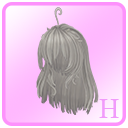
<style>
.page{position:relative;width:128px;height:128px}
.page>*{position:absolute;margin:0}
.t1{font:28.4px "TimesNewRomanPSMT";color:#f19bfb}
</style>
<div class="page">
<p class="t1" style="left:99px;top:99px;width:20px;height:19px">Hvv</p>
</div>
